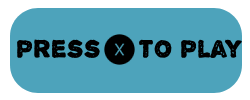
<style>
.page{position:relative;width:250px;height:100px;background:#4da3bb}
.page>*{position:absolute;margin:0}
.t1{font:27px "AlphaEcho";color:#000000}
</style>
<div class="page">
<p class="t1" style="left:17px;top:39px;width:225px;height:19px">press     to play</p>
</div>
